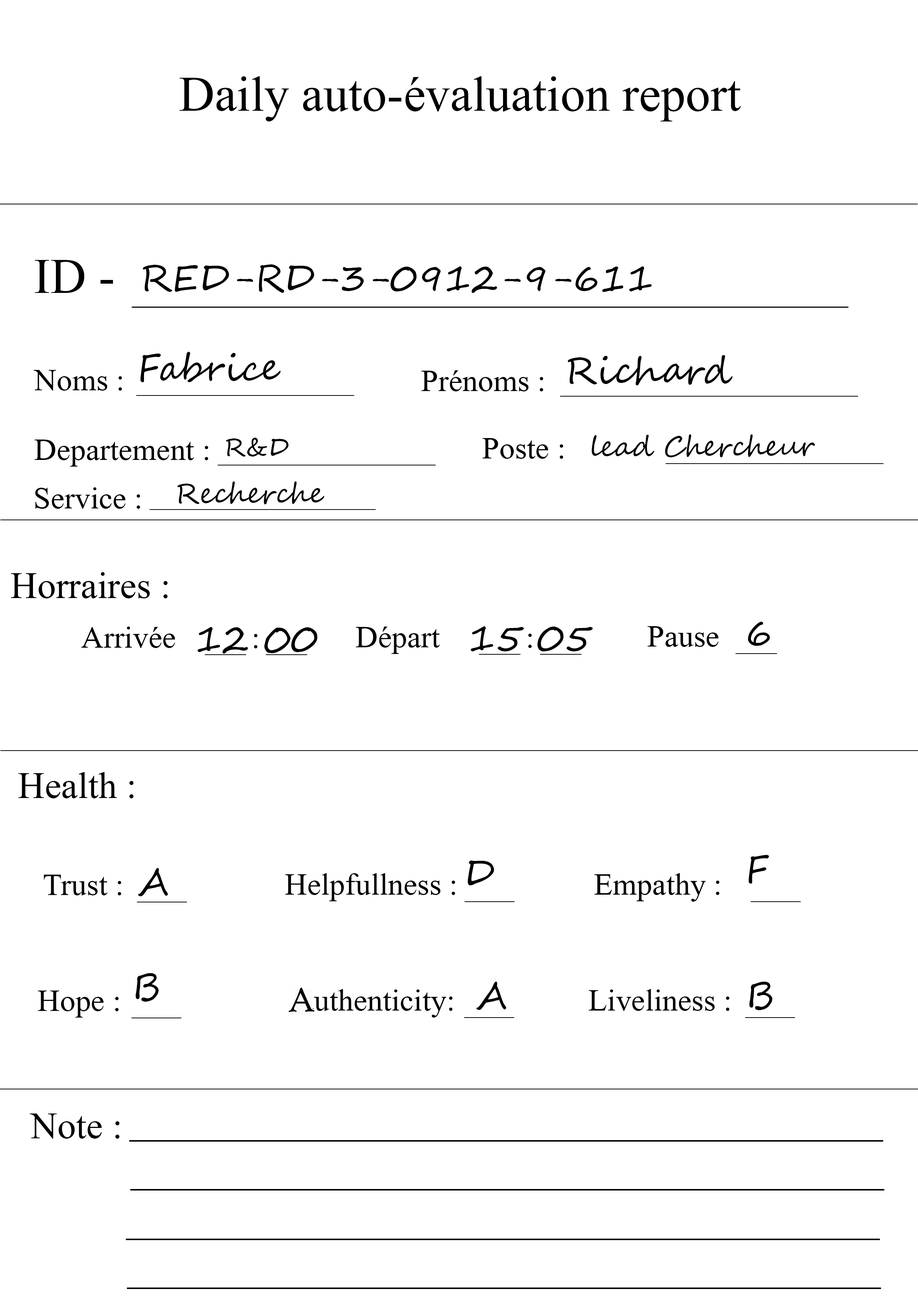
<style>
.page{position:relative;width:918px;height:1299px;background:#ffffff}
.page>*{position:absolute;margin:0}
.t1{font:74px "Microsoft-Himalaya";color:#000000}
.t2{font:37px "SegoeScript";color:#000000}
.t3{font:46.3px "Microsoft-Himalaya";color:#000000}
.t4{font:24.7px "SegoeScript";color:#000000}
.t5{font:27.8px "SegoeScript";color:#000000}
.t6{font:55.5px "Microsoft-Himalaya";color:#000000}
.t7{font:37px "HighTowerText-Reg";color:#000000}
</style>
<div class="page">
<p class="t1" style="left:180px;top:76px;width:561px;height:45px">Daily auto-évaluation report</p>
<p class="t1" style="left:35px;top:260px;width:78px;height:33px">ID -</p>
<p class="t2" style="left:143px;top:264px;width:509px;height:29px">RED-RD-3-0912-9-611</p>
<p class="t2" style="left:140px;top:352px;width:141px;height:30px">Fabrice</p>
<p class="t2" style="left:568px;top:355px;width:165px;height:30px">Richard</p>
<p class="t3" style="left:34px;top:370px;width:88px;height:21px">Noms :</p>
<p class="t3" style="left:421px;top:370px;width:122px;height:21px">Prénoms :</p>
<p class="t4" style="left:226px;top:438px;width:63px;height:18px">R&amp;D</p>
<p class="t3" style="left:482px;top:438px;width:81px;height:21px">Poste :</p>
<p class="t5" style="left:592px;top:434px;width:223px;height:23px">lead Chercheur</p>
<p class="t3" style="left:34px;top:439px;width:174px;height:27px">Departement :</p>
<p class="t5" style="left:177px;top:481px;width:147px;height:23px">Recherche</p>
<p class="t3" style="left:35px;top:487px;width:105px;height:22px">Service :</p>
<p class="t6" style="left:11px;top:572px;width:157px;height:26px">Horraires :</p>
<p class="t3" style="left:81px;top:626px;width:94px;height:22px">Arrivée</p>
<p class="t2" style="left:197px;top:627px;width:121px;height:26px">12 00</p>
<p class="t3" style="left:356px;top:626px;width:84px;height:28px">Départ</p>
<p class="t2" style="left:471px;top:626px;width:122px;height:25px">15 05</p>
<p class="t3" style="left:648px;top:626px;width:71px;height:21px">Pause</p>
<p class="t2" style="left:748px;top:622px;width:22px;height:24px">6</p>
<p class="t3" style="left:254px;top:634px;width:4px;height:14px">:</p>
<p class="t3" style="left:528px;top:633px;width:4px;height:15px">:</p>
<p class="t6" style="left:18px;top:772px;width:116px;height:26px">Health :</p>
<p class="t2" style="left:749px;top:854px;width:20px;height:30px">F</p>
<p class="t2" style="left:138px;top:868px;width:30px;height:28px">A</p>
<p class="t2" style="left:468px;top:860px;width:26px;height:25px">D</p>
<p class="t3" style="left:44px;top:874px;width:77px;height:21px">Trust :</p>
<p class="t3" style="left:285px;top:873px;width:170px;height:28px">Helpfullness :</p>
<p class="t3" style="left:594px;top:873px;width:126px;height:28px">Empathy :</p>
<p class="t2" style="left:136px;top:973px;width:23px;height:28px">B</p>
<p class="t7" style="left:288px;top:987px;width:27px;height:25px">A</p>
<p class="t3" style="left:301px;top:989px;width:152px;height:28px">authenticity:</p>
<p class="t2" style="left:476px;top:981px;width:30px;height:29px">A</p>
<p class="t3" style="left:589px;top:989px;width:141px;height:22px">Liveliness :</p>
<p class="t2" style="left:749px;top:981px;width:24px;height:29px">B</p>
<p class="t3" style="left:38px;top:990px;width:81px;height:27px">Hope :</p>
<p class="t6" style="left:30px;top:1113px;width:90px;height:25px">Note :</p>
</div>
